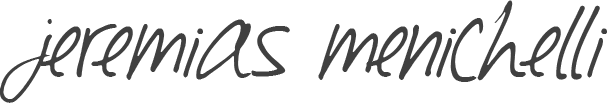
<style>
.page{position:relative;width:608px;height:103px;background:#ffffff}
.page>*{position:absolute;margin:0}
.t1{font:87px "Southpaw";letter-spacing:0.001em;color:#404040}
</style>
<div class="page">
<p class="t1" style="left:0px;top:0px;width:607px;height:103px">jeremias menichelli</p>
</div>
